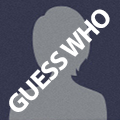
<style>
.page{position:relative;width:120px;height:120px}
.page>*{position:absolute;margin:0}
.t1{font:26.8px "MyriadPro-Bold";letter-spacing:-0.04em;color:#ffffff;text-transform:uppercase}
</style>
<div class="page">
<p class="t1" style="left:9px;top:9px;width:101px;height:103px;rotate:-46deg">GUESS WHO</p>
</div>
